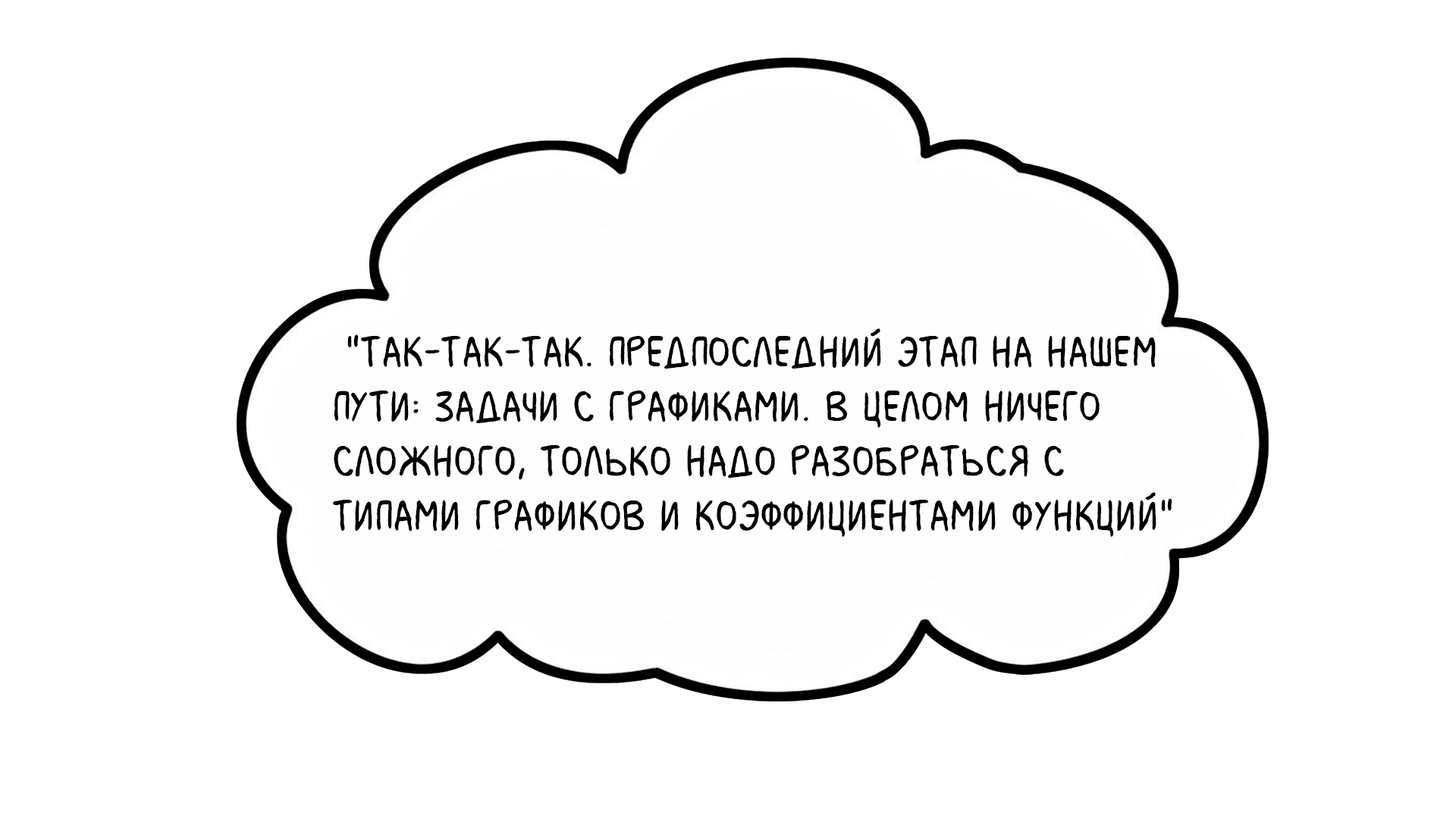
<style>
.page{position:relative;width:1456px;height:819px;background:#ffffff}
.page>*{position:absolute;margin:0}
.t1{font:45.5px "MilkMustacheBB";color:#000000}
</style>
<div class="page">
<p class="t1" style="left:333px;top:328px;width:839px;height:209px">"Так-так-так. Предпоследний этап на нашем <br>пути: задачи с графиками. В целом ничего <br>сложного, только надо разобраться с <br>типами графиков и коэффициентами функций"</p>
</div>
